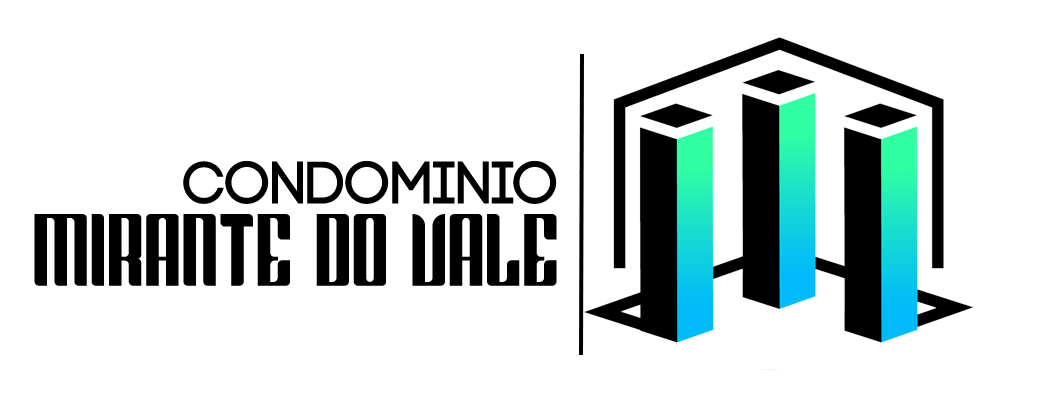
<style>
.page{position:relative;width:1061px;height:408px;background:#ffffff}
.page>*{position:absolute;margin:0}
.t1{font:102px/82px "GreenleafRegular";color:#000000}
.t2{font:60px/82px "Code-Bold";color:#000000}
</style>
<div class="page">
<p class="t1" style="left:34px;top:160px;width:523px;height:126px;text-align:right"><span class="t2">CONDOMINIO <br></span>MIRANTE DO VALE</p>
</div>
